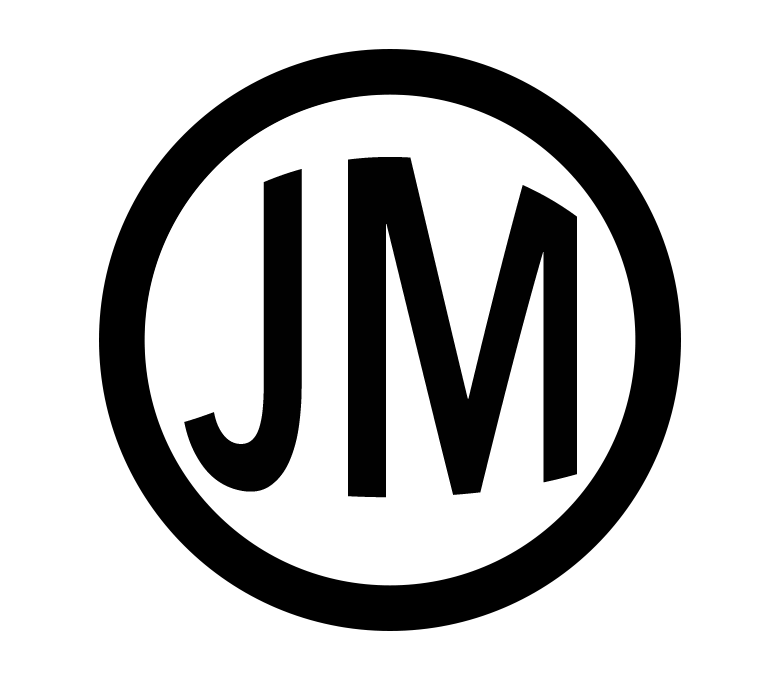
<style>
.page{position:relative;width:772px;height:678px;background:#ffffff}
.page>*{position:absolute;margin:0}
.t1{font:332px "AvenirNext-DemiBold";color:#010101;text-transform:uppercase;scale:0.88 1}
</style>
<div class="page">
<p class="t1" style="left:184px;top:157px;width:393px;height:341px">JM</p>
</div>
